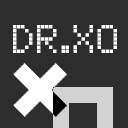
<style>
.page{position:relative;width:128px;height:128px;background:#2d2d2d}
.page>*{position:absolute;margin:0}
.t1{font:28px "CallOne-Regular";color:#ffffff}
</style>
<div class="page">
<p class="t1" style="left:13px;top:25px;width:104px;height:28px">DR.XO</p>
</div>
